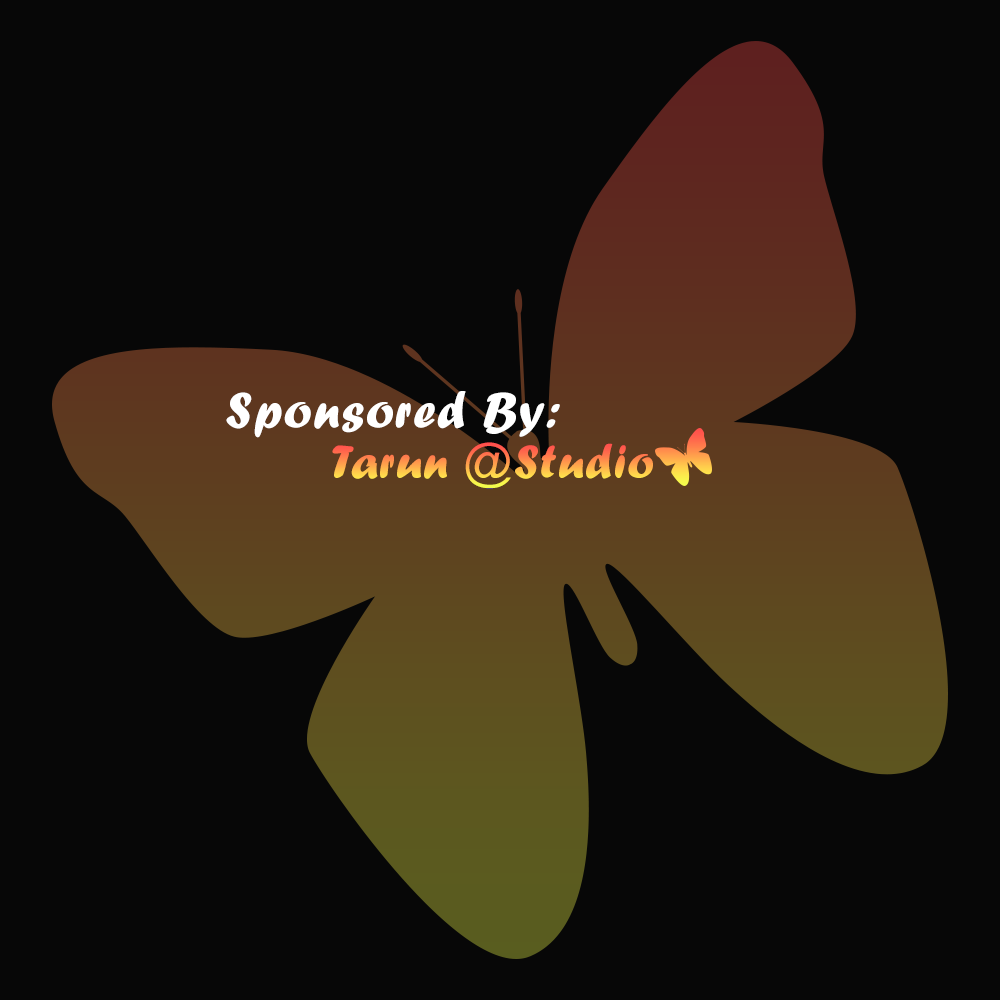
<style>
.page{position:relative;width:1000px;height:1000px;background:#070707}
.page>*{position:absolute;margin:0}
.t1{font:52.3px "ForteMT";letter-spacing:0.025em;color:#ffffff}
.t2{font:48.7px "ForteMT";letter-spacing:0.025em}
</style>
<div class="page">
<p class="t1" style="left:226px;top:391px;width:334px;height:47px">Sponsored By:</p>
<p class="t2" style="left:332px;top:442px;width:321px;height:47px">Tarun @Studio</p>
</div>
